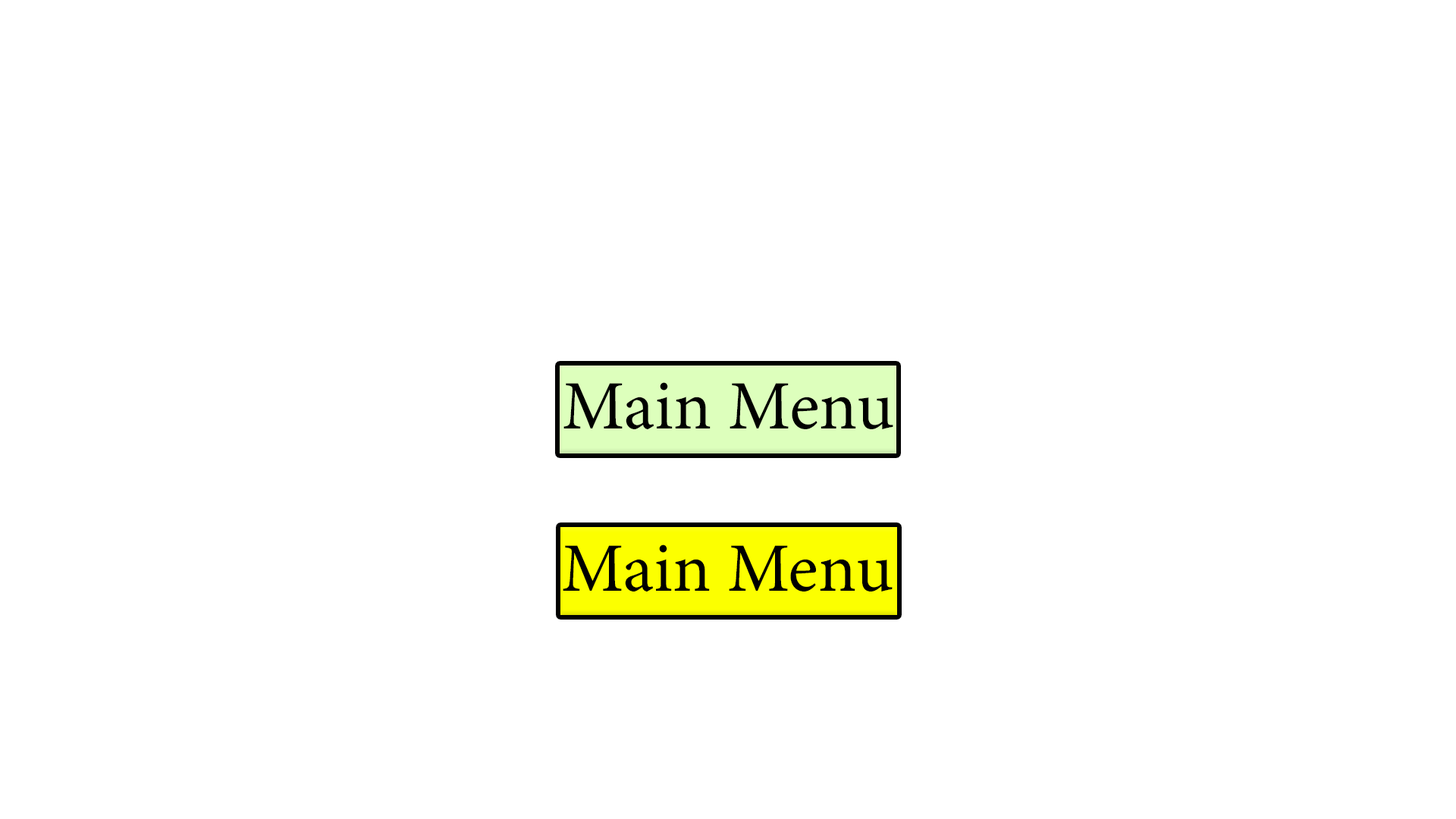
<style>
.page{position:relative;width:1456px;height:819px;background:#ffffff}
.page>*{position:absolute;margin:0}
.t1{font:69.5px "MinionVariableConcept-Roman";color:#000000}
</style>
<div class="page">
<p class="t1" style="left:563px;top:382px;width:330px;height:47px">Main Menu</p>
<p class="t1" style="left:563px;top:544px;width:330px;height:47px">Main Menu</p>
</div>
